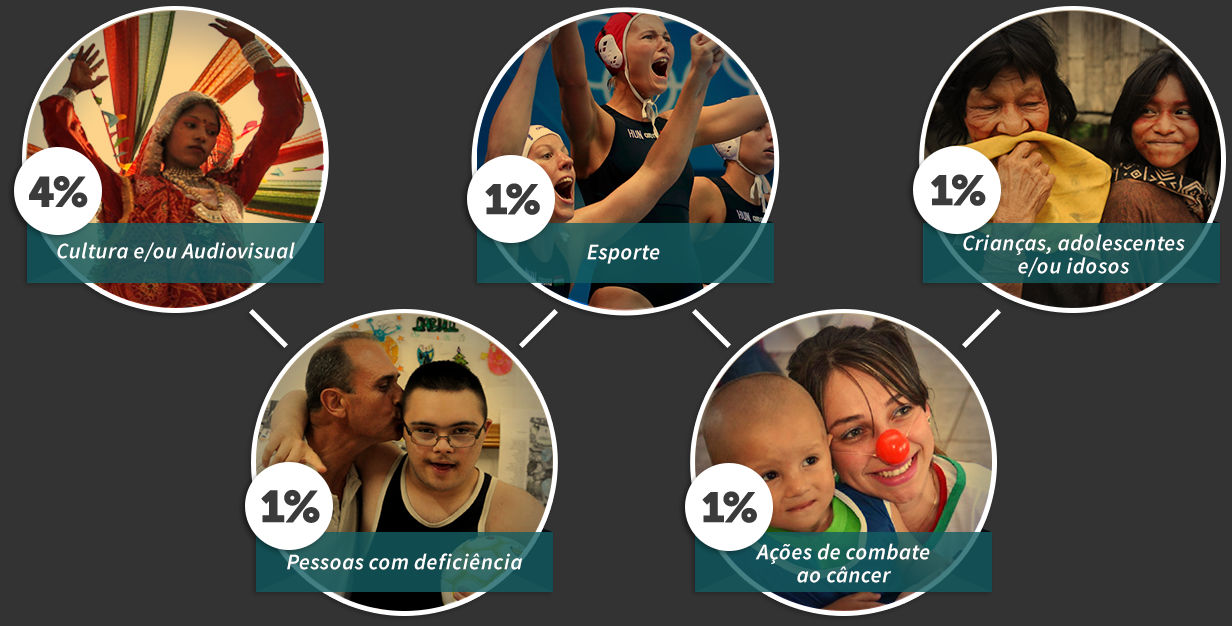
<style>
.page{position:relative;width:1232px;height:626px;background:#333333}
.page>*{position:absolute;margin:0}
.t1{font:42px "Museo900-Regular";letter-spacing:-0.075em;color:#3b3b3b;font-weight:bold}
.t2{font:42.1px "Museo900-Regular";letter-spacing:-0.075em;color:#3b3b3b;font-weight:bold}
.t3{font:22px "SourceSansPro-SemiboldIt";letter-spacing:0.025em;color:#ffffff}
.t4{font:22px/23px "SourceSansPro-SemiboldIt";letter-spacing:0.025em;color:#ffffff}
.t5{font:44px "Museo900-Regular";letter-spacing:-0.075em;color:#3b3b3b;font-weight:bold}
</style>
<div class="page">
<p class="t1" style="left:931px;top:174px;width:55px;height:32px">1%</p>
<p class="t2" style="left:29px;top:176px;width:59px;height:32px">4%</p>
<p class="t1" style="left:485px;top:183px;width:55px;height:32px">1%</p>
<p class="t3" style="left:57px;top:242px;width:238px;height:20px">Cultura e/ou Audiovisual</p>
<p class="t3" style="left:587px;top:244px;width:73px;height:20px">Esporte</p>
<p class="t4" style="left:963px;top:234px;width:222px;height:43px;text-align:center">Crianças, adolescentes<br>e/ou idosos</p>
<p class="t5" style="left:261px;top:489px;width:59px;height:34px">1%</p>
<p class="t1" style="left:702px;top:491px;width:55px;height:32px">1%</p>
<p class="t4" style="left:755px;top:543px;width:175px;height:40px;text-align:center">Ações de combate<br>ao câncer</p>
<p class="t3" style="left:287px;top:553px;width:235px;height:17px">Pessoas com deficiência</p>
</div>
